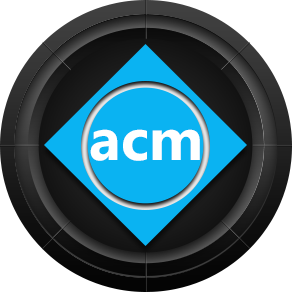
<style>
.page{position:relative;width:292px;height:292px;background:#ffffff}
.page>*{position:absolute;margin:0}
.t1{font:58.8px "Leelawadee-Bold";color:#ffffff}
</style>
<div class="page">
<p class="t1" style="left:90px;top:129px;width:110px;height:32px">acm</p>
</div>
